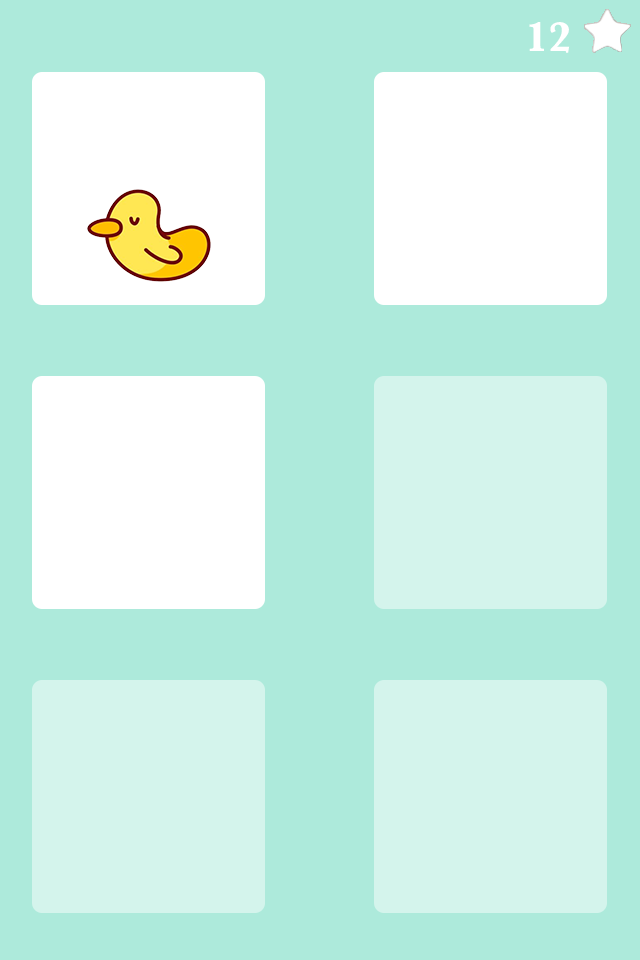
<style>
.page{position:relative;width:640px;height:960px;background:#adeadb}
.page>*{position:absolute;margin:0}
.t1{font:43px "Baskerville-Bold";color:#ffffff;text-transform:uppercase}
</style>
<div class="page">
<p class="t1" style="left:529px;top:22px;width:41px;height:31px">12</p>
</div>
